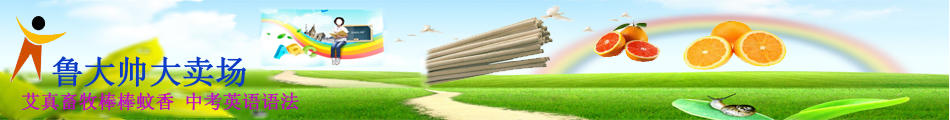
<style>
.page{position:relative;width:950px;height:120px}
.page>*{position:absolute;margin:0}
.t1{font:32px "SimSun";color:#0b3bc5;font-weight:bold}
.t2{font:18.7px "SimSun";color:#be0bc5;font-weight:bold}
</style>
<div class="page">
<p class="t1" style="left:52px;top:56px;width:194px;height:31px">鲁大帅大卖场</p>
<p class="t2" style="left:21px;top:92px;width:278px;height:19px">艾真畜牧棒棒蚊香 中考英语语法</p>
</div>
